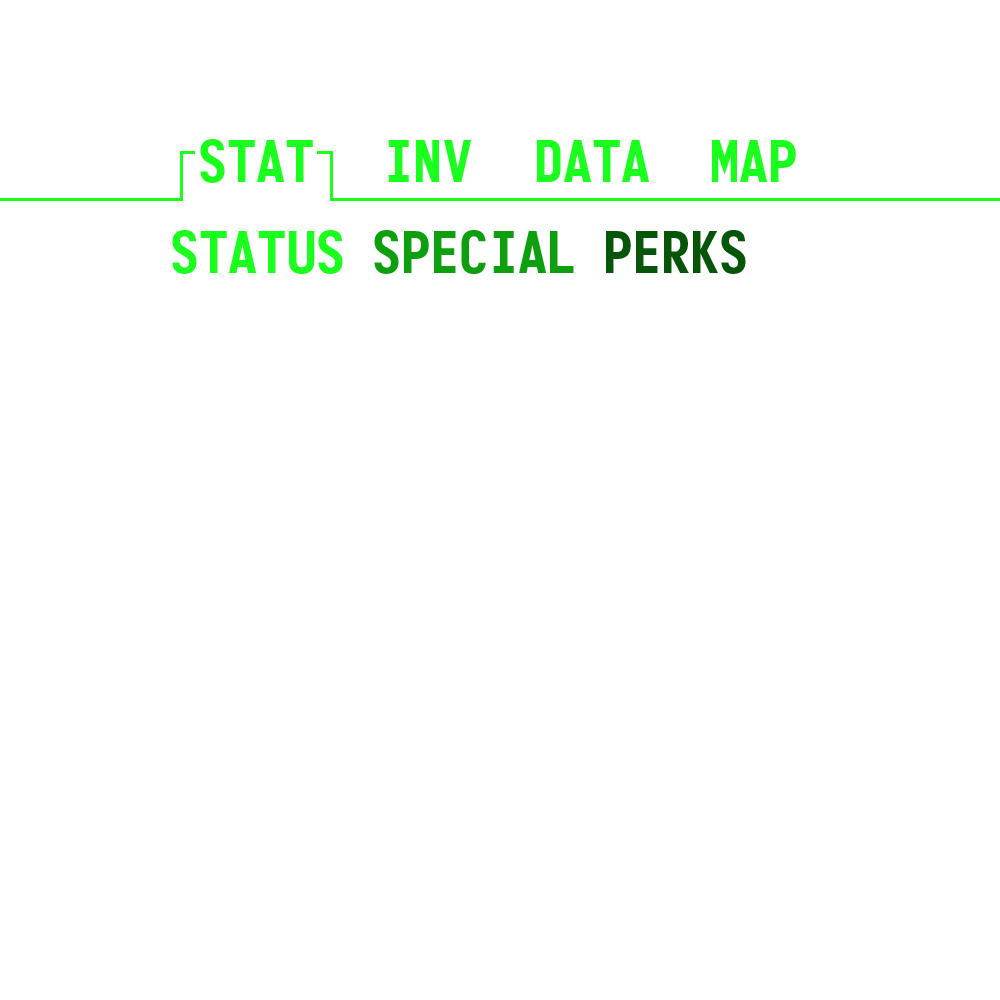
<style>
.page{position:relative;width:1000px;height:1000px;background:#ffffff}
.page>*{position:absolute;margin:0}
.t1{font:58.3px "Monofonto-Regular";color:#1bff1e}
.t2{font:58.3px "Monofonto-Regular";color:#0d9f0e}
.t3{font:58.3px "Monofonto-Regular";color:#075508}
</style>
<div class="page">
<p class="t1" style="left:200px;top:139px;width:113px;height:44px">STAT</p>
<p class="t1" style="left:388px;top:140px;width:83px;height:42px">INV</p>
<p class="t1" style="left:537px;top:140px;width:112px;height:42px">DATA</p>
<p class="t1" style="left:712px;top:140px;width:84px;height:42px">MAP</p>
<p class="t1" style="left:172px;top:230px;width:171px;height:44px">STATUS</p>
<p class="t2" style="left:374px;top:230px;width:200px;height:44px">SPECIAL</p>
<p class="t3" style="left:606px;top:230px;width:140px;height:44px">PERKS</p>
</div>
